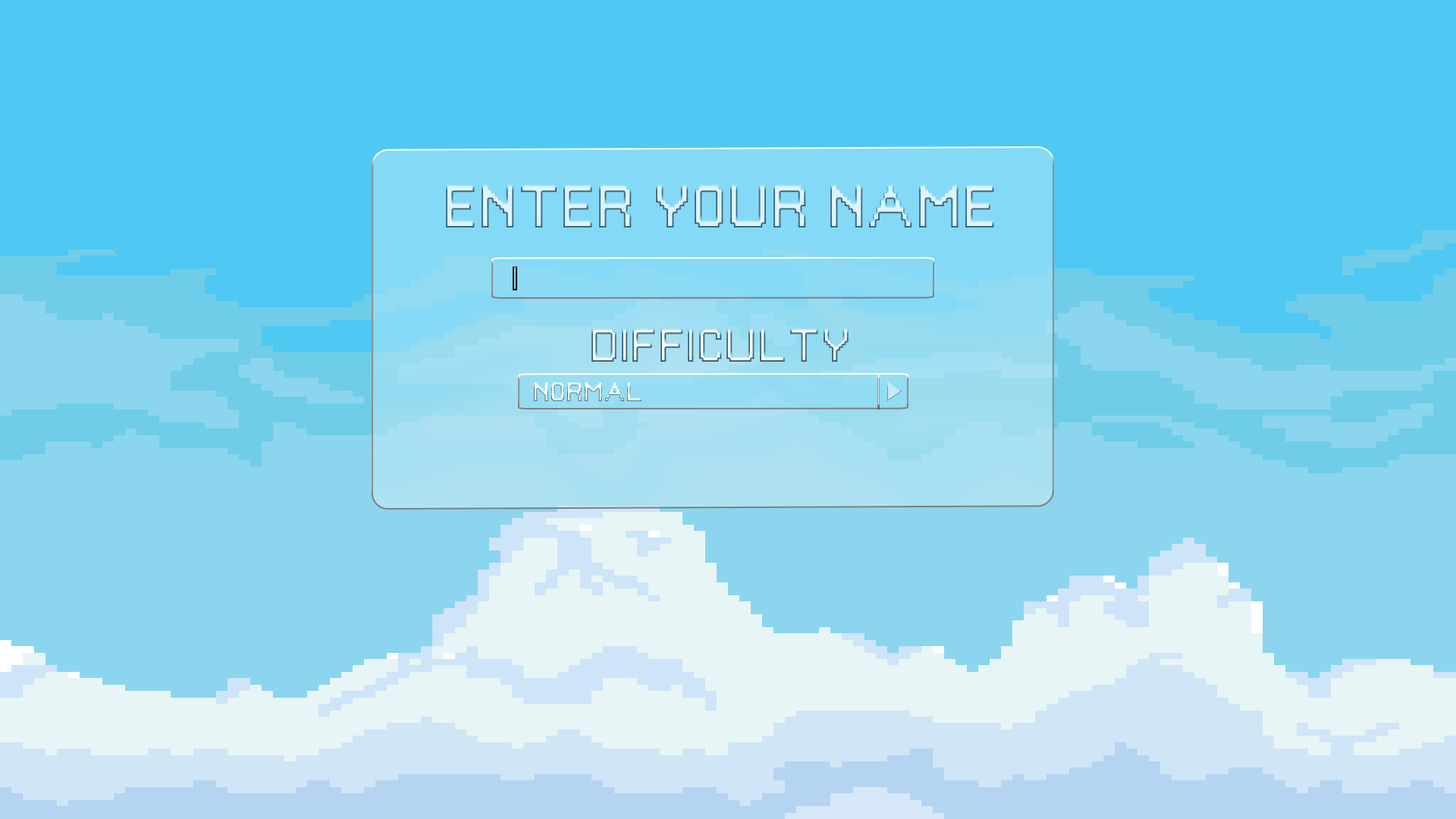
<style>
.page{position:relative;width:1456px;height:819px;background:#4fc8f3}
.page>*{position:absolute;margin:0}
.t1{font:56.9px "PixelGameFont";text-transform:uppercase}
.t2{font:44.2px "PixelGameFont";text-transform:uppercase}
.t3{font:25.3px "PixelGameFont";text-transform:uppercase}
</style>
<div class="page">
<p class="t1" style="left:446px;top:184px;width:548px;height:43px">enter your name</p>
<p class="t2" style="left:591px;top:328px;width:258px;height:34px">difficulty</p>
<p class="t3" style="left:534px;top:382px;width:108px;height:19px">NORMAL</p>
</div>
